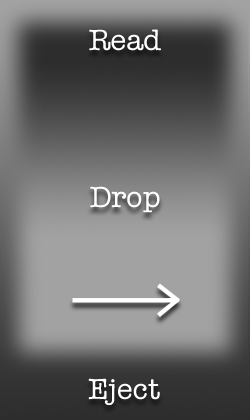
<style>
.page{position:relative;width:250px;height:420px}
.page>*{position:absolute;margin:0}
.t1{font:30px "AmericanTypewriter";color:#ffffff}
</style>
<div class="page">
<p class="t1" style="left:89px;top:29px;width:72px;height:22px">Read</p>
<p class="t1" style="left:90px;top:186px;width:70px;height:27px">Drop</p>
<p class="t1" style="left:88px;top:378px;width:72px;height:27px">Eject</p>
</div>
